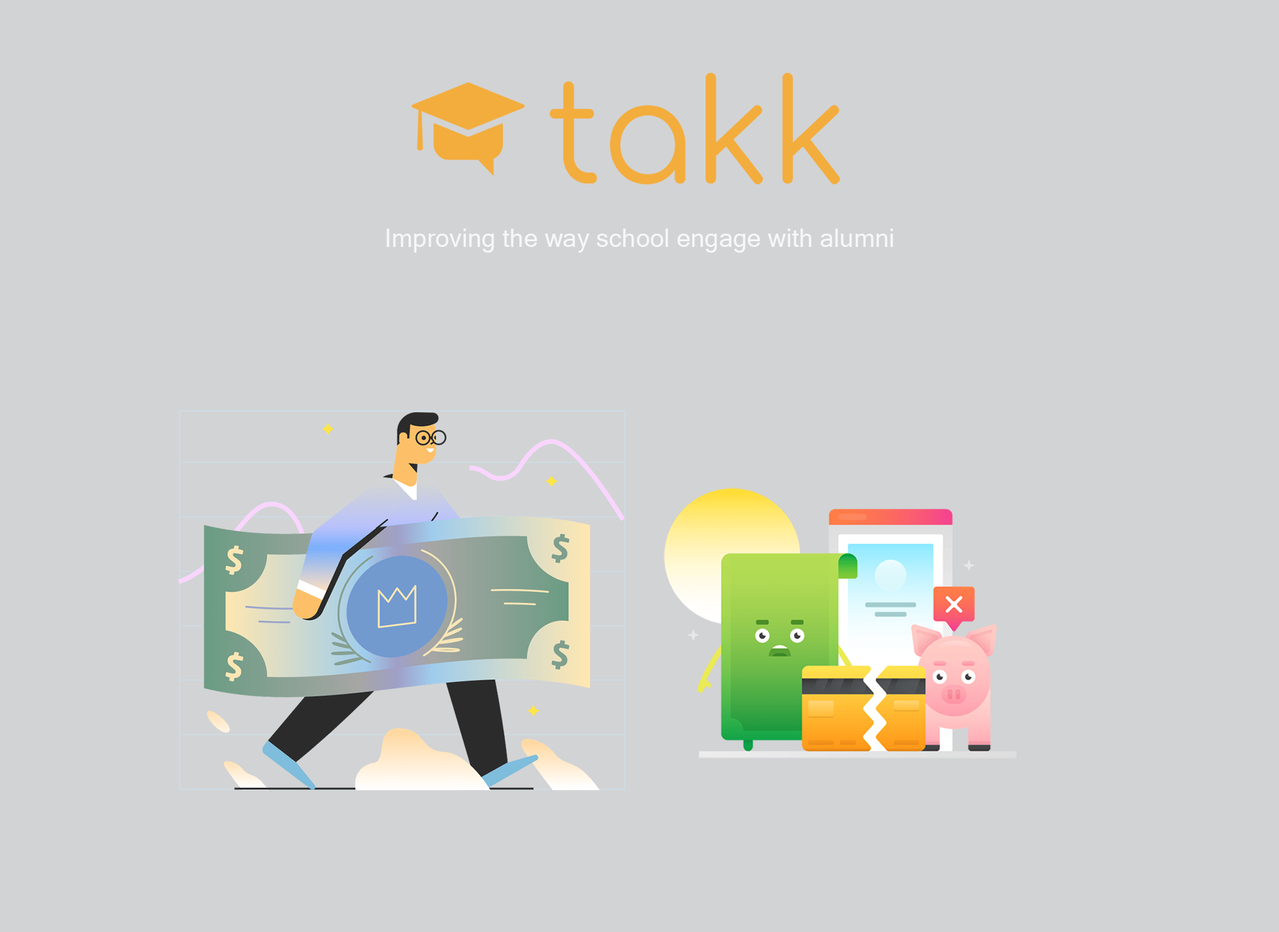
<style>
.page{position:relative;width:1279px;height:932px;background:#d2d3d5}
.page>*{position:absolute;margin:0}
.t1{font:25.3px "MicrosoftSansSerif";color:#f7f7f7}
</style>
<div class="page">
<p class="t1" style="left:386px;top:229px;width:507px;height:24px">Improving the way school engage with alumni</p>
</div>
